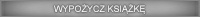
<style>
.page{position:relative;width:200px;height:17px}
.page>*{position:absolute;margin:0}
.t1{font:9px "ArialMT";color:#ffffff}
</style>
<div class="page">
<p class="t1" style="left:54px;top:4px;width:91px;height:10px">WYPOŻYCZ KSIĄŻKĘ</p>
</div>
